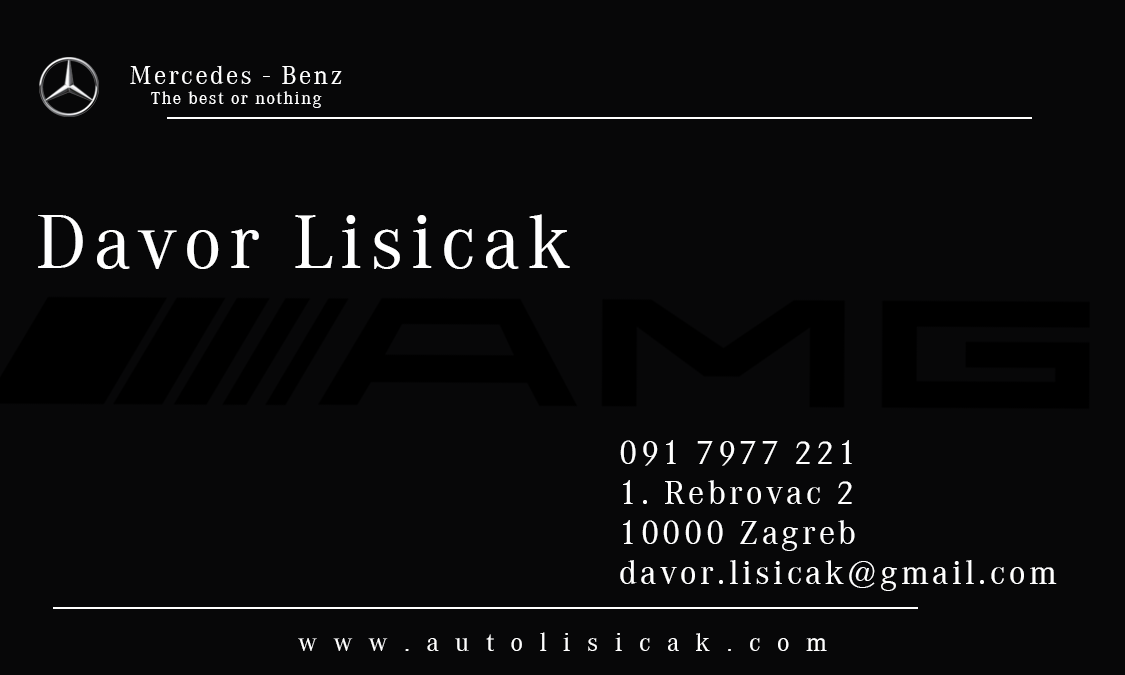
<style>
.page{position:relative;width:1125px;height:675px;background:#070708}
.page>*{position:absolute;margin:0}
.t1{font:16.7px "CorporateABQ-Regular";letter-spacing:0.1em;color:#ffffff}
.t2{font:25px "CorporateABQ-Regular";letter-spacing:0.1em;color:#ffffff}
.t3{font:75px "CorporateABQ-Regular";letter-spacing:0.1em;color:#ffffff}
.t4{font:33.3px "CorporateABQ-Regular";letter-spacing:0.1em;color:#ffffff}
.t5{font:25px "CorporateABQ-Regular";letter-spacing:0.66em;color:#ffffff}
</style>
<div class="page">
<p class="t1" style="left:130px;top:65px;width:212px;height:43px;text-align:center"><span class="t2">Mercedes - Benz<br></span>The best or nothing</p>
<p class="t3" style="left:38px;top:214px;width:532px;height:55px">Davor Lisicak</p>
<p class="t4" style="left:620px;top:440px;width:437px;height:151px">091 7977 221<br>1. Rebrovac 2<br>10000 Zagreb<br>davor.lisicak@gmail.com</p>
<p class="t5" style="left:298px;top:632px;width:529px;height:19px">www.autolisicak.com</p>
</div>
